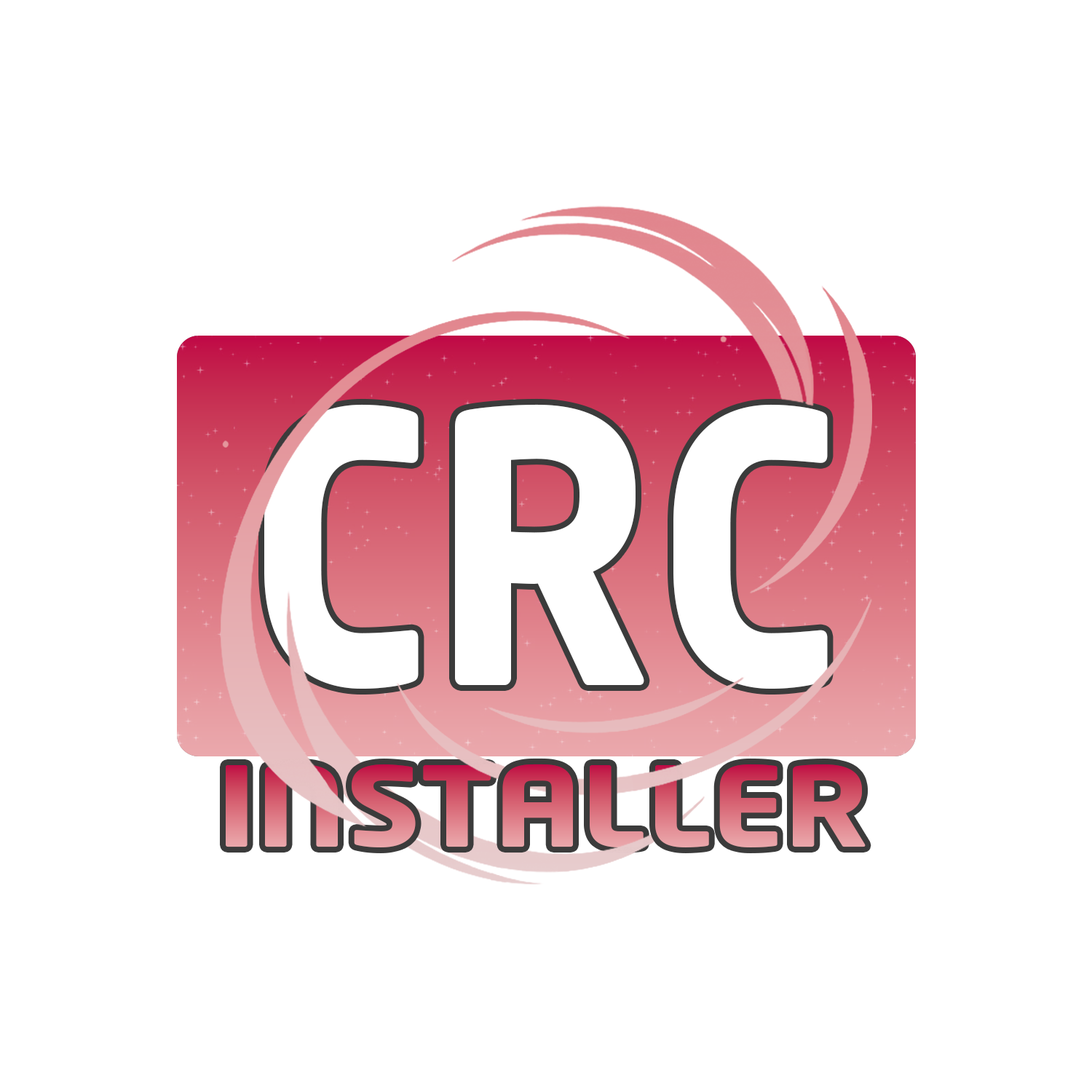
<style>
.page{position:relative;width:1092px;height:1092px;background:#ffffff}
.page>*{position:absolute;margin:0}
.t1{font:372.2px "NeoTech-Bold";color:#ffffff;scale:0.89 1}
.t2{font:109.2px "NeoTech-Bold";scale:1.15 1}
</style>
<div class="page">
<p class="t1" style="left:264px;top:404px;width:564px;height:285px">CRC</p>
<p class="t2" style="left:226px;top:764px;width:640px;height:83px">INSTALLER</p>
</div>
